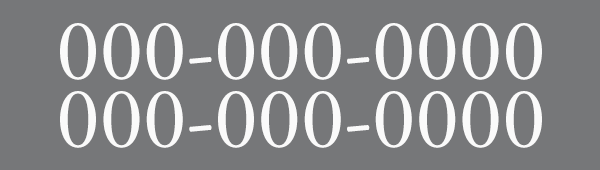
<style>
.page{position:relative;width:600px;height:170px;background:#767779}
.page>*{position:absolute;margin:0}
.t1{font:86.8px "AGaramondPro-Regular";color:#fafafa}
</style>
<div class="page">
<p class="t1" style="left:60px;top:23px;width:482px;height:57px">000-000-0000</p>
<p class="t1" style="left:60px;top:91px;width:482px;height:57px">000-000-0000</p>
</div>
